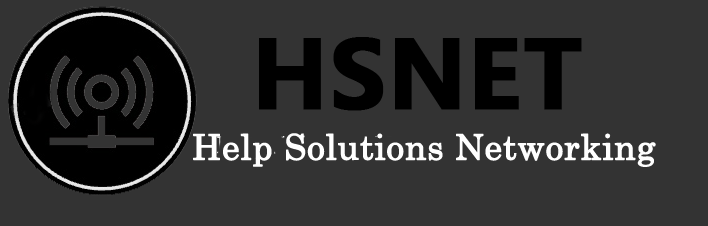
<style>
.page{position:relative;width:708px;height:226px;background:#333333}
.page>*{position:absolute;margin:0}
.t1{font:92px "MicrosoftYaHeiUI-Bold";color:#000000;font-weight:bold}
.t2{font:35px "CenturySchoolbook";color:#ffffff;font-weight:bold}
</style>
<div class="page">
<p class="t1" style="left:259px;top:37px;width:323px;height:74px">HSNET</p>
<p class="t2" style="left:193px;top:133px;width:463px;height:34px">Help Solutions Networking</p>
</div>
